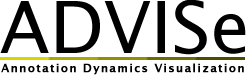
<style>
.page{position:relative;width:246px;height:75px;background:#ffffff}
.page>*{position:absolute;margin:0}
.t1{font:72px "LucidaGrande";color:#000000}
.t2{font:11px "LucidaGrande-Bold";letter-spacing:0.1em;color:#000000;font-weight:bold}
</style>
<div class="page">
<p class="t1" style="left:0px;top:0px;width:246px;height:55px">ADVISe</p>
<p class="t2" style="left:1px;top:63px;width:243px;height:12px">Annotation Dynamics Visualization</p>
</div>
